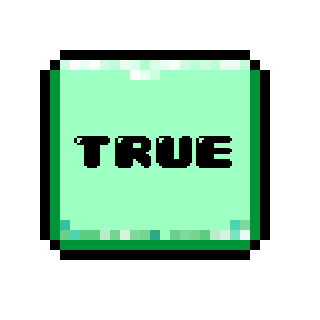
<style>
.page{position:relative;width:320px;height:320px;background:#ffffff}
.page>*{position:absolute;margin:0}
.t1{font:38.8px "04b30";color:#000000;scale:1.14 1}
</style>
<div class="page">
<p class="t1" style="left:74px;top:136px;width:158px;height:32px">TRUE</p>
</div>
